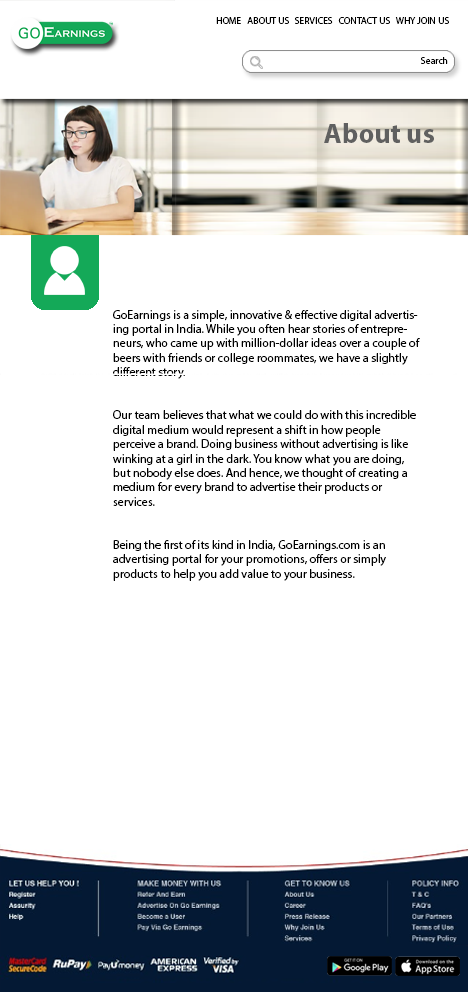
<style>
.page{position:relative;width:468px;height:992px;background:#ffffff}
.page>*{position:absolute;margin:0}
.t1{font:9.2px "MyriadPro-Regular";color:#000000;scale:1.04 1}
.t2{font:27.6px "MyriadPro-Bold";color:#606060}
.t3{font:12px "MyriadPro-Regular";color:#000000}
</style>
<div class="page">
<p class="t1" style="left:216px;top:17px;width:233px;height:7px">HOME   ABOUT US   SERVICES   CONTACT US   WHY JOIN US</p>
<p class="t1" style="left:421px;top:57px;width:27px;height:7px">Search</p>
<p class="t2" style="left:324px;top:123px;width:110px;height:20px">About us</p>
<p class="t3" style="left:113px;top:310px;width:307px;height:271px">GoEarnings is a simple, innovative &amp; effective digital advertising portal in India. While you often hear stories of entrepreneurs, who came up with million-dollar ideas over a couple of beers with friends or college roommates, we have a slightly different story.<br><br><br>Our team believes that what we could do with this incredible digital medium would represent a shift in how people perceive a brand. Doing business without advertising is like winking at a girl in the dark. You know what you are doing, but nobody else does. And hence, we thought of creating a medium for every brand to advertise their products or services.<br><br><br>Being the first of its kind in India, GoEarnings.com is an advertising portal for your promotions, offers or simply products to help you add value to your business.</p>
</div>
